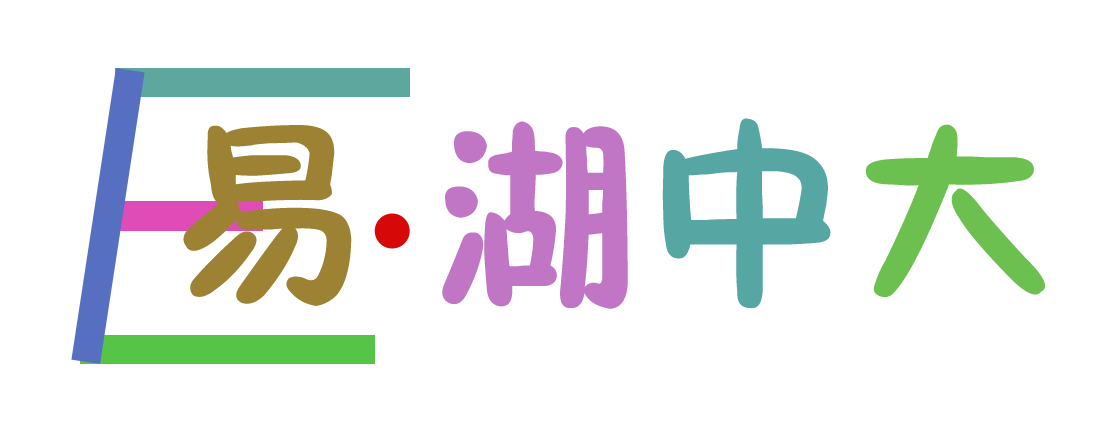
<style>
.page{position:relative;width:1114px;height:446px;background:#ffffff}
.page>*{position:absolute;margin:0}
.t1{font:208.3px "FZSEJW--GB1-0";color:#9c8232}
.t2{font:208.3px "FZSEJW--GB1-0";color:#c075c5}
.t3{font:208.3px "FZSEJW--GB1-0";color:#56a7a4}
.t4{font:208.3px "FZSEJW--GB1-0";color:#6cc04f}
</style>
<div class="page">
<p class="t1" style="left:183px;top:125px;width:169px;height:181px">易</p>
<p class="t2" style="left:442px;top:118px;width:603px;height:191px">湖<span class="t3">中</span><span class="t4">大</span></p>
</div>
